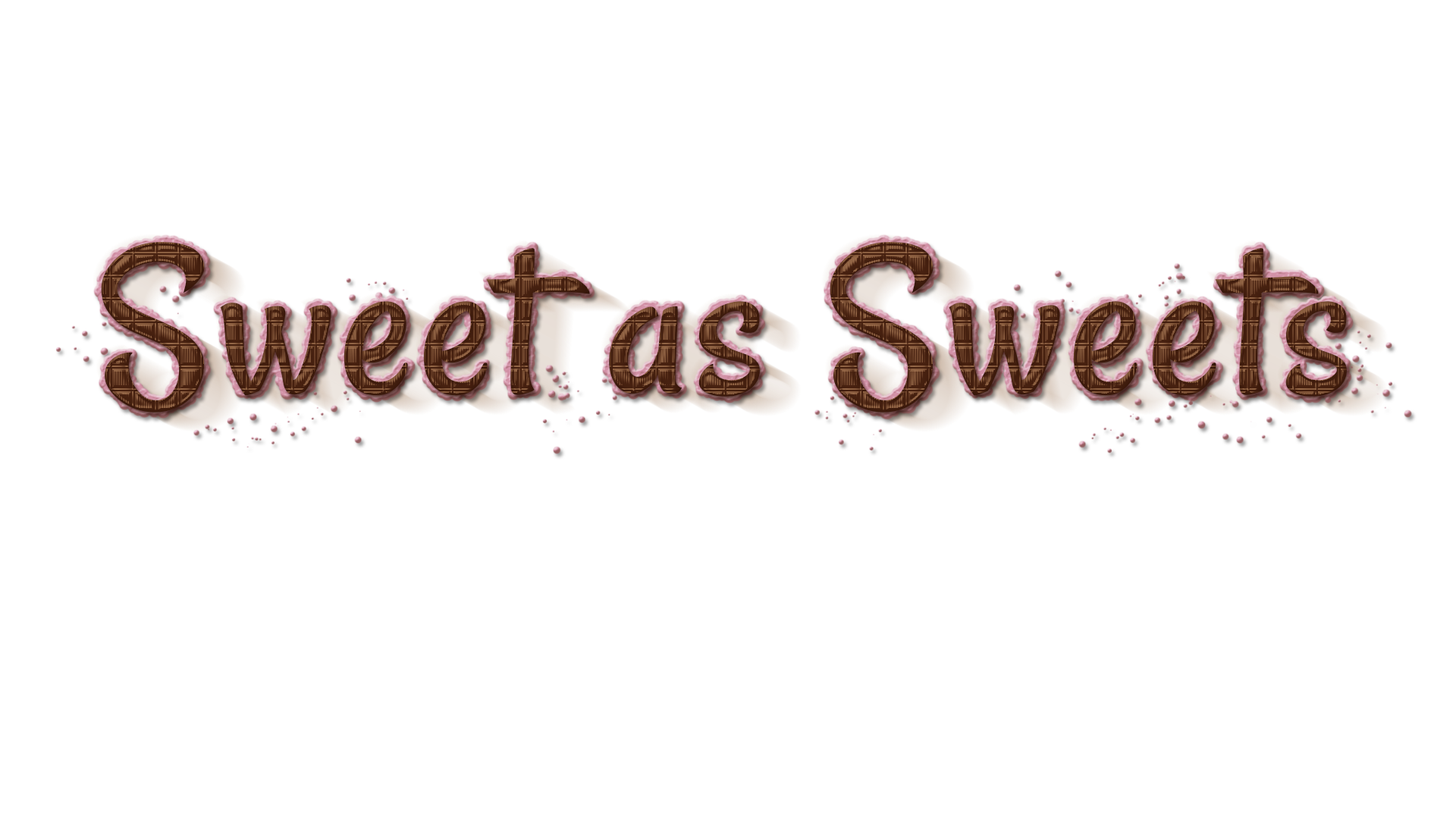
<style>
.page{position:relative;width:1456px;height:819px;background:#ffffff}
.page>*{position:absolute;margin:0}
.t1{font:227.5px "Rancho-Regular";letter-spacing:0.025em}
</style>
<div class="page">
<p class="t1" style="left:101px;top:242px;width:1246px;height:171px">Sweet as Sweets</p>
</div>
